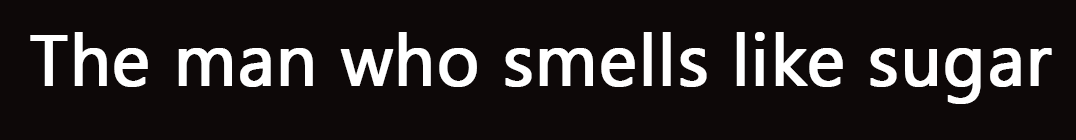
<style>
.page{position:relative;width:1076px;height:140px;background:#0d0808}
.page>*{position:absolute;margin:0}
.t1{font:72px "SegoeUISymbol";color:#ffffff;font-weight:bold}
</style>
<div class="page">
<p class="t1" style="left:30px;top:32px;width:1022px;height:72px">The man who smells like sugar</p>
</div>
